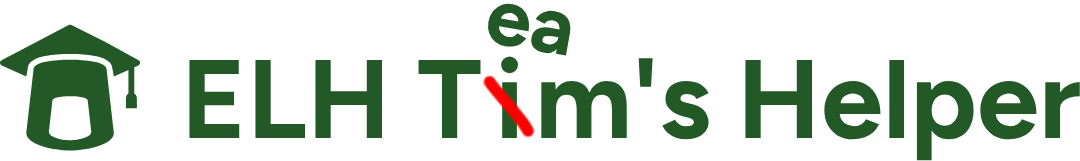
<style>
.page{position:relative;width:1080px;height:161px;background:#ffffff}
.page>*{position:absolute;margin:0}
.t1{font:81.6px "Figtree-Bold";color:#235926}
.t2{font:111.3px "Figtree-Bold";color:#235926}
</style>
<div class="page">
<p class="t1" style="left:488px;top:3px;width:83px;height:53px;rotate:10deg">ea</p>
<p class="t2" style="left:189px;top:58px;width:891px;height:103px">ELH T  m's Helper</p>
<p class="t2" style="left:501px;top:56px;width:17px;height:82px">i</p>
</div>
